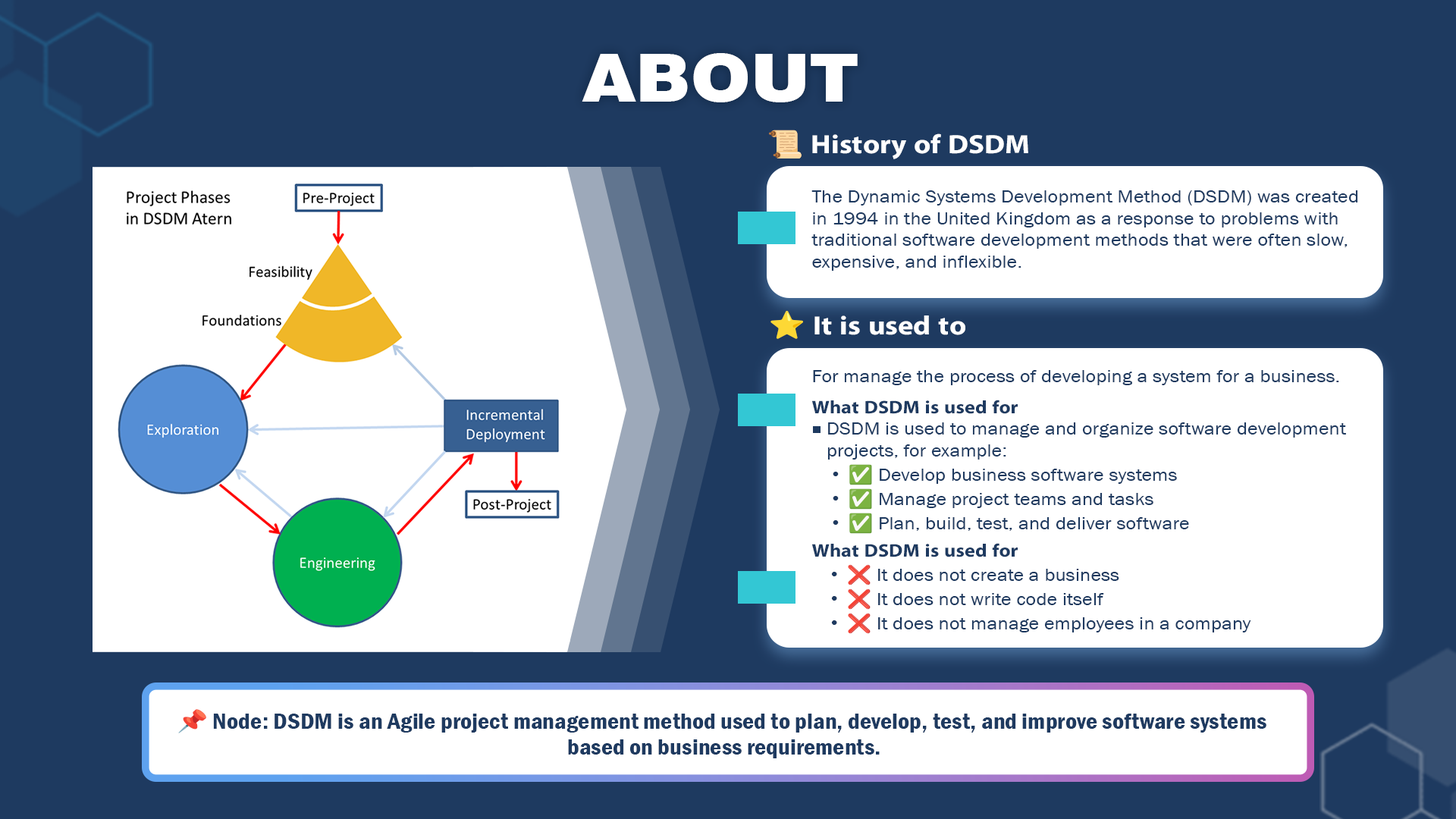
<style>
.page{position:relative;width:1456px;height:819px;background:#ffffff}
.page>*{position:absolute;margin:0}
.t1{font:66px "Swiss721BT-Black";color:#ffffff;scale:1.1 1}
.t2{font:26.6px "iKampuchea001_O'Chrov";color:#ffffff;scale:1.11 1}
.t3{font:26.6px "NotoColorEmoji-SVG";color:#ffffff;scale:1.11 1}
.t4{font:18.2px "AA-Khmer-AngDaunPov";color:#1e3a60;scale:1.1 1}
.t5{font:18.2px "iKampuchea001_O'Chrov";color:#1e3a60;scale:1.1 1}
.t6{font:9.1px "Marlett";color:#1e3a60;scale:1.1 1}
.t7{font:13.6px/24.3px "Marlett";color:#1e3a60;scale:1.1 1}
.t8{font:18.2px/24.3px "NotoColorEmoji-SVG";color:#1e3a60;scale:1.1 1}
.t9{font:18.2px/24.3px "AA-Khmer-AngDaunPov";color:#1e3a60;scale:1.1 1}
.t10{font:21.6px "FranklinGothic-DemiCond";color:#1e3a60;scale:1.16 1}
.t11{font:21.6px "NotoColorEmoji-SVG";color:#1e3a60;scale:1.16 1}
</style>
<div class="page">
<p class="t1" style="left:582px;top:53px;width:276px;height:49px">ABOUT</p>
<p class="t2" style="left:768px;top:130px;width:260px;height:29px"><span class="t3">📜</span> History of DSDM</p>
<p class="t4" style="left:811px;top:190px;width:547px;height:81px">The Dynamic Systems Development Method (DSDM) was created <br>in 1994 in the United Kingdom as a response to problems with <br>traditional software development methods that were often slow, <br>expensive, and inflexible.</p>
<p class="t2" style="left:770px;top:310px;width:195px;height:29px"><span class="t3">⭐</span> It is used to</p>
<p class="t4" style="left:812px;top:370px;width:534px;height:264px">For manage the process of developing a system for a business.<br><br><span class="t5">What DSDM is used for<br></span><span class="t6">g</span> DSDM is used to manage and organize software development <br>   projects, for example:<br>   <span class="t7">h </span><span class="t8">✅</span><span class="t9"> Develop business software systems<br>   </span><span class="t7">h </span><span class="t8">✅</span><span class="t9"> Manage project teams and tasks<br>   </span><span class="t7">h </span><span class="t8">✅</span><span class="t9"> Plan, build, test, and deliver software<br><br></span><span class="t5">What DSDM is used for<br>   </span><span class="t7">h </span><span class="t8">❌</span><span class="t9"> It does not create a business<br>   </span><span class="t7">h </span><span class="t8">❌</span><span class="t9"> It does not write code itself<br>   </span><span class="t7">h </span><span class="t8">❌</span><span class="t9"> It does not manage employees in a company</span></p>
<p class="t10" style="left:178px;top:709px;width:1088px;height:49px;text-align:center"><span class="t11">📌 </span>Node: DSDM is an Agile project management method used to plan, develop, test, and improve software systems<br> based on business requirements.</p>
</div>
